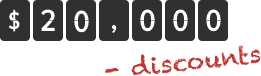
<style>
.page{position:relative;width:261px;height:76px;background:#ffffff}
.page>*{position:absolute;margin:0}
.t1{font:25px "ProximaNovaCond-Semibold";color:#ffffff}
.t2{font:32px "ProximaNovaCond-Semibold";color:#ffffff}
.t3{font:24px "Chalkduster";color:#bd3430}
</style>
<div class="page">
<p class="t1" style="left:8px;top:9px;width:12px;height:23px">$</p>
<p class="t2" style="left:41px;top:9px;width:14px;height:22px">2</p>
<p class="t2" style="left:74px;top:10px;width:15px;height:23px">0</p>
<p class="t2" style="left:140px;top:9px;width:15px;height:23px">0</p>
<p class="t2" style="left:173px;top:9px;width:15px;height:23px">0</p>
<p class="t2" style="left:206px;top:9px;width:15px;height:23px">0</p>
<p class="t2" style="left:111px;top:25px;width:6px;height:8px">,</p>
<p class="t3" style="left:105px;top:45px;width:156px;height:31px;rotate:-6deg">- discounts</p>
</div>
